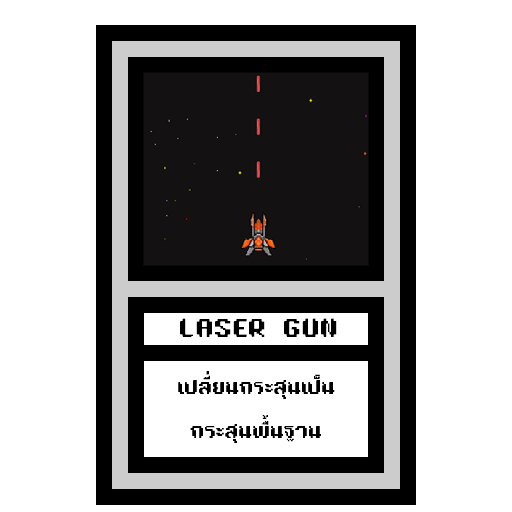
<style>
.page{position:relative;width:512px;height:512px;background:#ffffff}
.page>*{position:absolute;margin:0}
.t1{font:24px "TA16BIT-Regular";color:#000000}
.t2{font:18px "TA16BIT-Regular";color:#000000}
</style>
<div class="page">
<p class="t1" style="left:180px;top:318px;width:157px;height:19px">LASER GUN</p>
<p class="t2" style="left:178px;top:371px;width:157px;height:72px;text-align:center">เปลี่ยนกระสุนเป็น<br><br>กระสุนพื้นฐาน</p>
</div>
